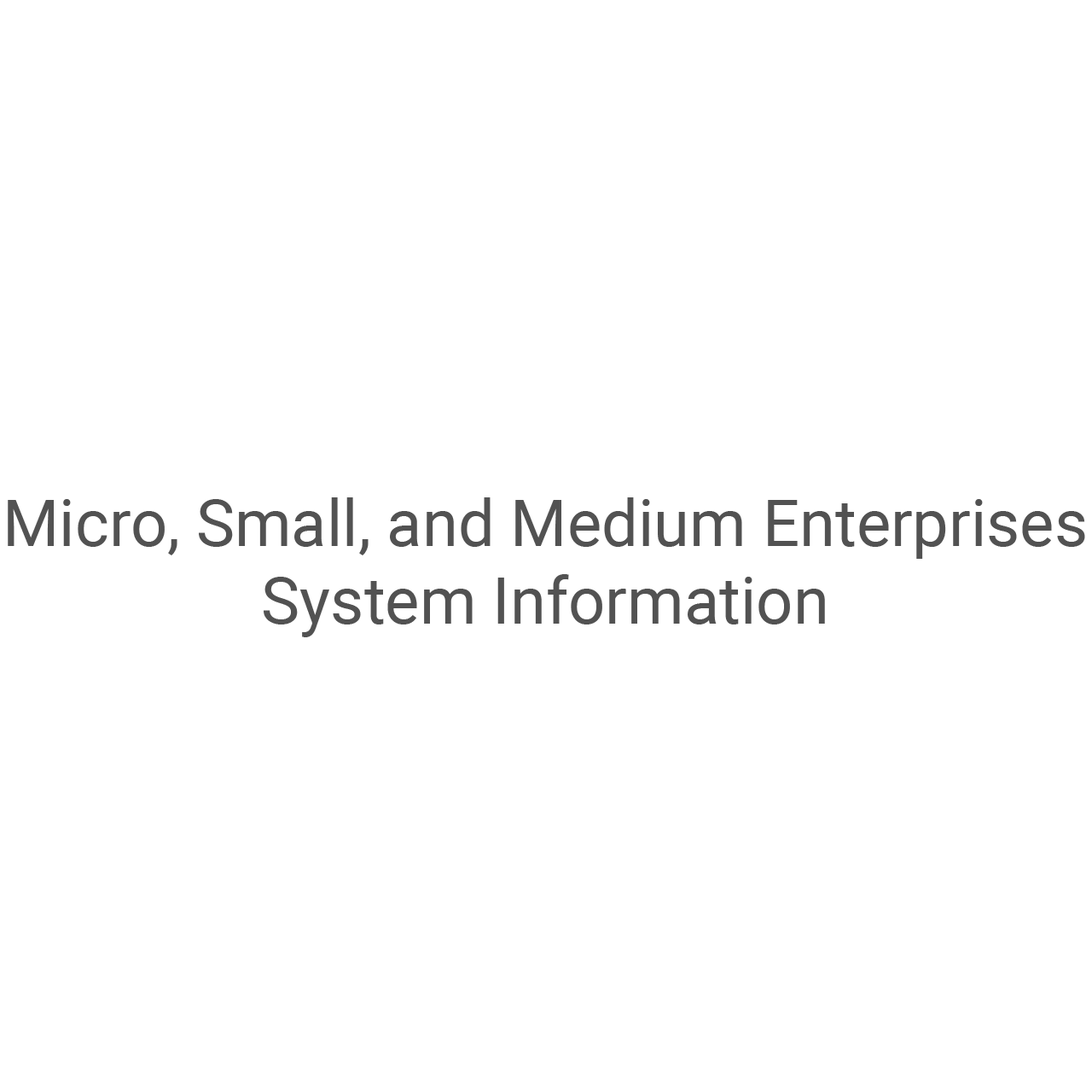
<style>
.page{position:relative;width:1092px;height:1092px;background:#ffffff}
.page>*{position:absolute;margin:0}
.t1{font:64.8px "Roboto-Regular";color:#525252}
</style>
<div class="page">
<p class="t1" style="left:8px;top:497px;width:1077px;height:140px;text-align:center">Micro, Small, and Medium Enterprises<br>System Information</p>
</div>
